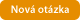
<style>
.page{position:relative;width:80px;height:20px;background:#e68d00}
.page>*{position:absolute;margin:0}
.t1{font:11px "MyriadPro-Semibold";color:#ffffff}
</style>
<div class="page">
<p class="t1" style="left:11px;top:5px;width:58px;height:8px">Nová otázka</p>
</div>
